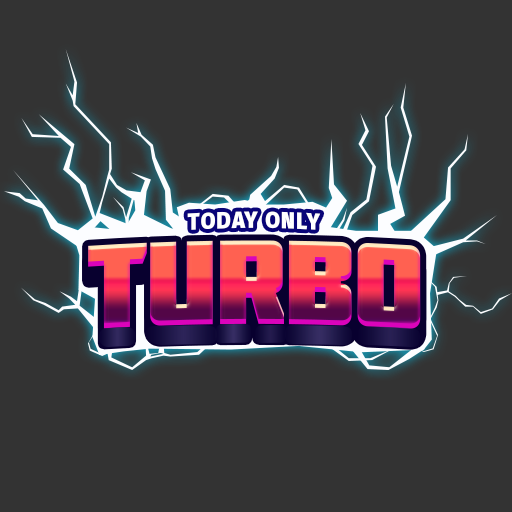
<style>
.page{position:relative;width:512px;height:512px;background:#333333}
.page>*{position:absolute;margin:0}
.t1{font:22.7px "FiraSans-Heavy";letter-spacing:0.05em;color:#ffffff;scale:0.96 1}
.t2{font:119px "Molot";letter-spacing:-0.025em}
</style>
<div class="page">
<p class="t1" style="left:187px;top:211px;width:134px;height:19px">TODAY ONLY</p>
<p class="t2" style="left:88px;top:240px;width:333px;height:89px">TURBO</p>
</div>
